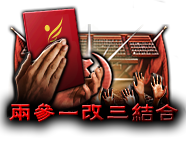
<style>
.page{position:relative;width:186px;height:149px;background:#ffffff}
.page>*{position:absolute;margin:0}
.t1{font:24.6px "FZZJ-MSHLFW"}
</style>
<div class="page">
<p class="t1" style="left:9px;top:103px;width:170px;height:20px">两参一改三结合</p>
</div>
